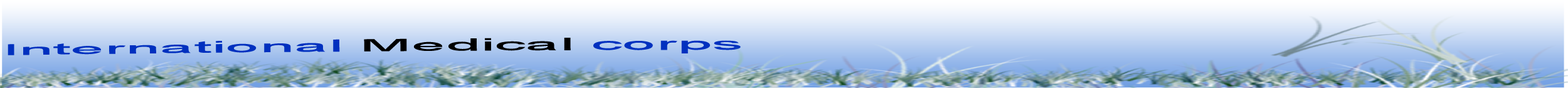
<style>
.page{position:relative;width:1568px;height:88px}
.page>*{position:absolute;margin:0}
.t1{font:15.1px "ArialMT";color:#0030bf;scale:4.12 1}
.t2{font:18.8px "Arial-BoldMT";color:#0030bf;scale:4.12 1}
.t3{font:15.1px "ArialMT";color:#000000;scale:4.12 1}
</style>
<div class="page">
<p class="t1" style="left:8px;top:38px;width:733px;height:17px"><span class="t2"><br><br></span>International <span class="t3">Medical</span> corps</p>
</div>
